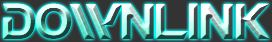
<style>
.page{position:relative;width:272px;height:42px}
.page>*{position:absolute;margin:0}
.t1{font:72px "ROBOTECHGP"}
</style>
<div class="page">
<p class="t1" style="left:3px;top:3px;width:267px;height:36px">DOWNLINK</p>
</div>
